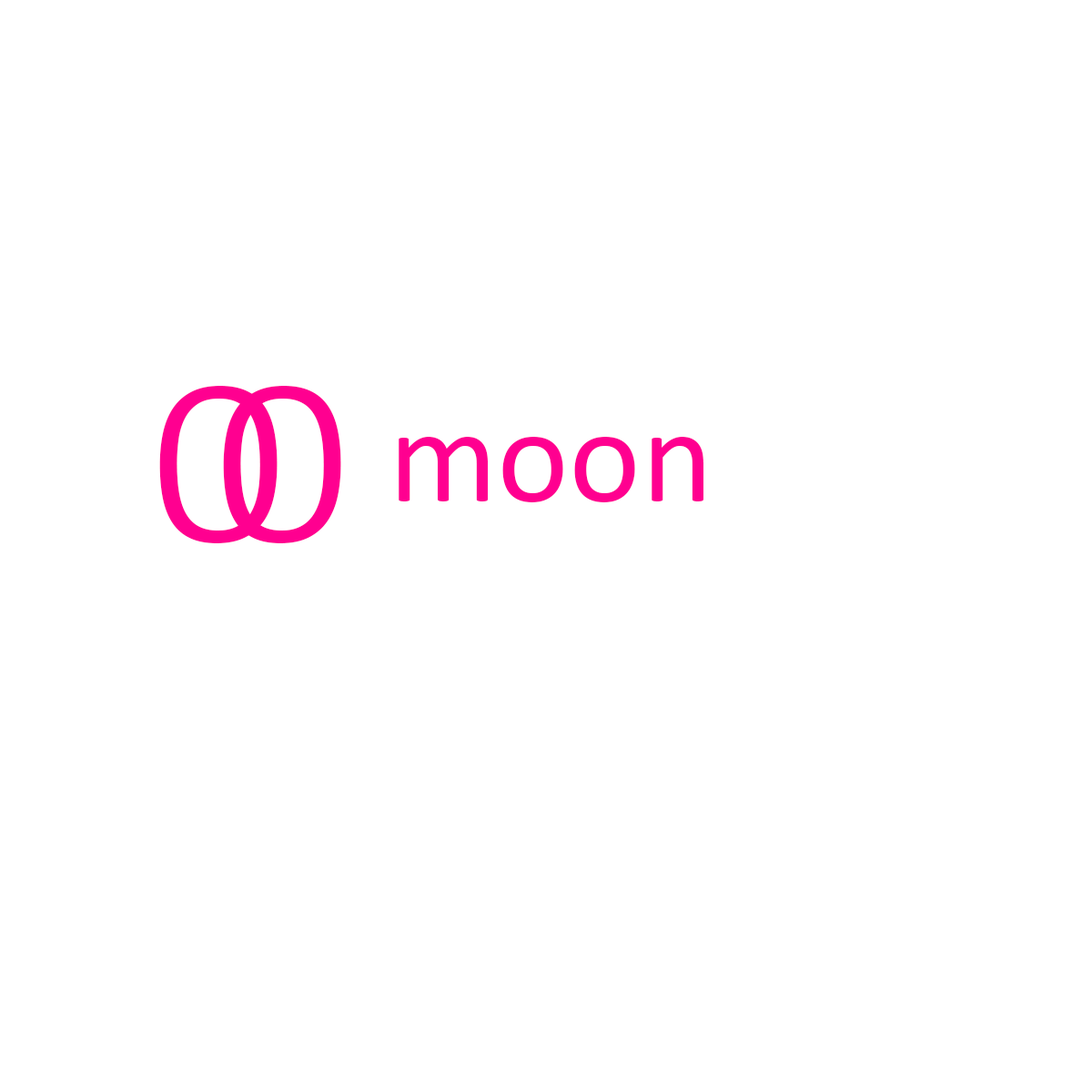
<style>
.page{position:relative;width:1092px;height:1092px;background:#ffffff}
.page>*{position:absolute;margin:0}
.t1{font:243px "Calibri-Light";color:#ff0090;scale:1.12 1}
.t2{font:136.5px "Calibri";color:#ff0090}
</style>
<div class="page">
<p class="t1" style="left:159px;top:386px;width:119px;height:157px">0</p>
<p class="t1" style="left:223px;top:386px;width:118px;height:157px">0</p>
<p class="t2" style="left:399px;top:437px;width:304px;height:65px">moon</p>
</div>
